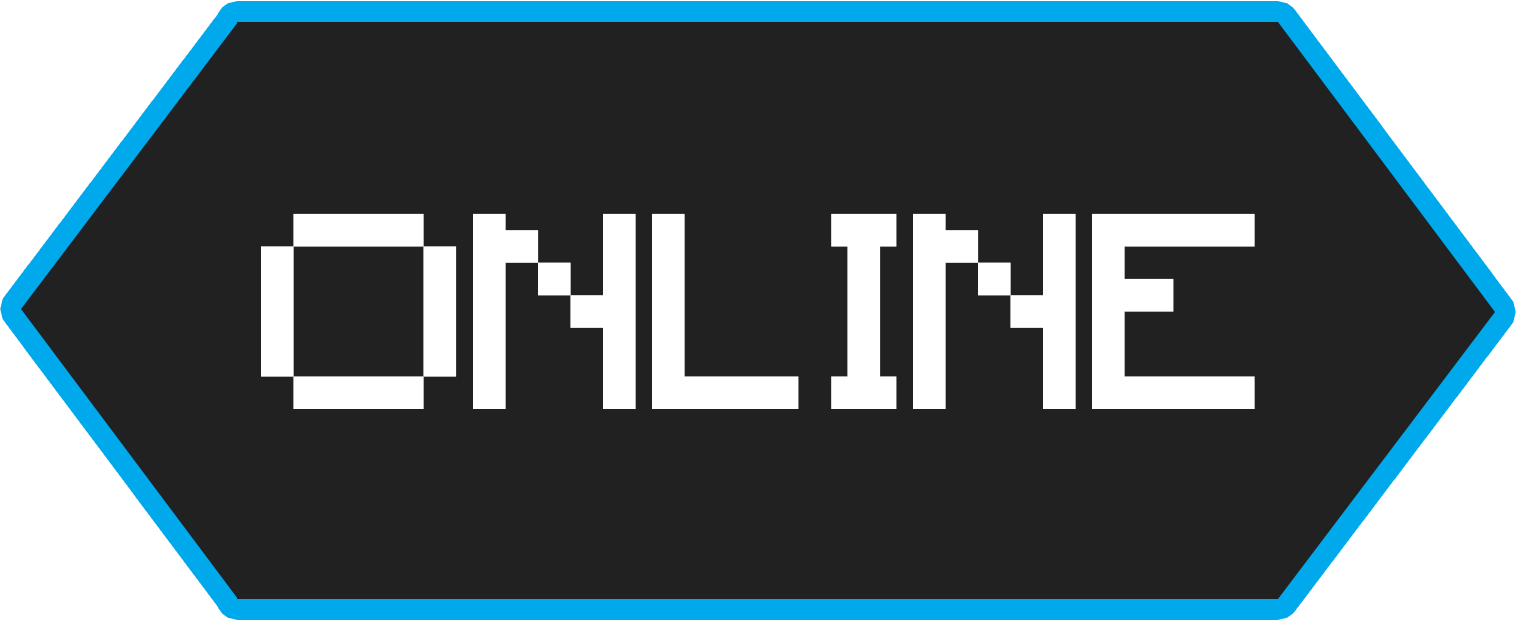
<style>
.page{position:relative;width:1516px;height:621px;background:#212121}
.page>*{position:absolute;margin:0}
.t1{font:260.3px "Minecraft";color:#ffffff}
</style>
<div class="page">
<p class="t1" style="left:261px;top:213px;width:994px;height:196px">ONLINE</p>
</div>
